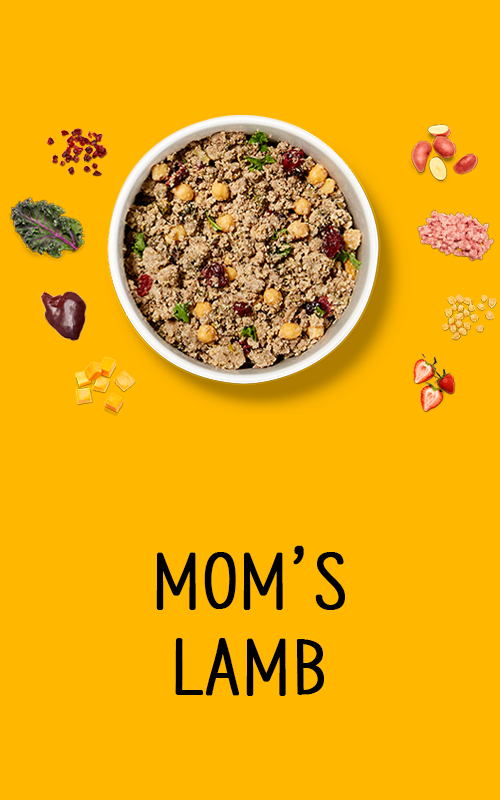
<style>
.page{position:relative;width:500px;height:800px;background:#ffb700}
.page>*{position:absolute;margin:0}
.t1{font:72px "NanumBarunpen";color:#000000;font-weight:bold}
</style>
<div class="page">
<p class="t1" style="left:156px;top:545px;width:189px;height:151px;text-align:center">MOM’S<br>LAMB</p>
</div>
